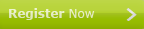
<style>
.page{position:relative;width:144px;height:29px}
.page>*{position:absolute;margin:0}
.t1{font:12px "Verdana-Bold";color:#e2eac3}
.t2{font:12px "Verdana";color:#e2eac3}
</style>
<div class="page">
<p class="t1" style="left:9px;top:8px;width:86px;height:12px">Register <span class="t2">Now</span></p>
</div>
